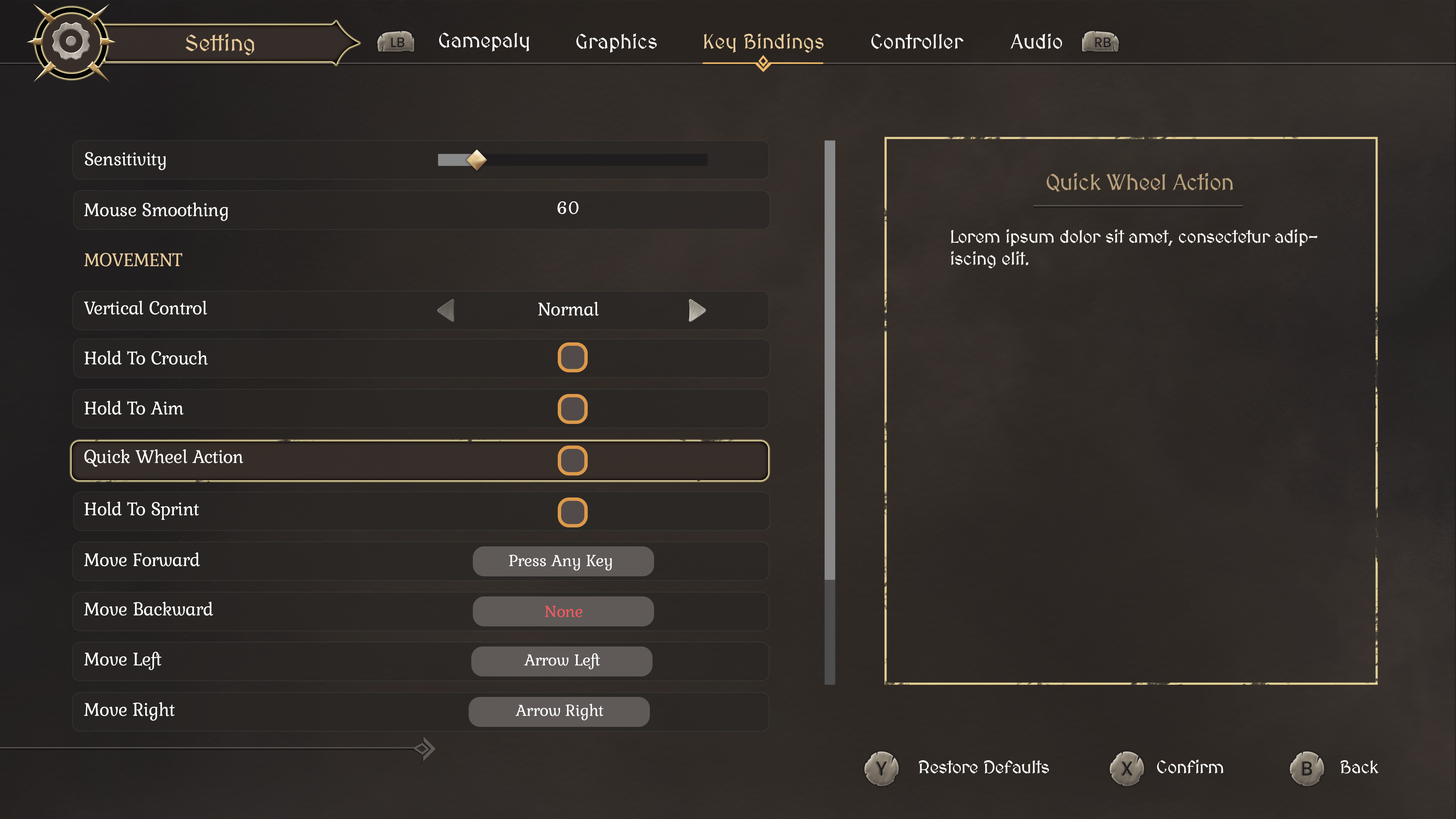
<style>
.page{position:relative;width:1456px;height:819px}
.page>*{position:absolute;margin:0}
.t1{font:22.7px "MedievalSharp";color:#e6c899}
.t2{font:20.5px "MedievalSharp";color:#fefefe}
.t3{font:20.5px "MedievalSharp";color:#ffffff}
.t4{font:20.5px "MedievalSharp";color:#e7cb9c}
.t5{font:19.2px "Kurale-Regular";letter-spacing:-0.02em;color:#ffffff}
.t6{font:22.7px "MedievalSharp";letter-spacing:-0.02em;color:#b79f7b}
.t7{font:18.2px "Kurale-Regular";letter-spacing:-0.02em;color:#ffffff}
.t8{font:18.2px "MedievalSharp";letter-spacing:-0.02em;color:#fffbf5}
.t9{font:19.2px "Kurale-Regular";letter-spacing:-0.02em;color:#e7cb9c}
.t10{font:17.3px "Kurale-Regular";letter-spacing:-0.02em;color:#ffffff}
.t11{font:17.3px "Kurale-Regular";letter-spacing:-0.02em;color:#f75b5f}
.t12{font:18.2px "MedievalSharp";letter-spacing:-0.02em;color:#ffffff}
</style>
<div class="page">
<p class="t1" style="left:185px;top:33px;width:69px;height:22px">Setting</p>
<p class="t2" style="left:439px;top:33px;width:90px;height:19px">Gamepaly</p>
<p class="t3" style="left:576px;top:33px;width:81px;height:20px">Graphics</p>
<p class="t4" style="left:704px;top:33px;width:120px;height:20px">Key Bindings</p>
<p class="t3" style="left:871px;top:34px;width:93px;height:15px">Controller</p>
<p class="t3" style="left:1010px;top:33px;width:52px;height:16px">Audio</p>
<p class="t5" style="left:85px;top:152px;width:81px;height:18px">Sensitivity</p>
<p class="t6" style="left:1046px;top:173px;width:187px;height:19px">Quick Wheel Action</p>
<p class="t5" style="left:84px;top:202px;width:144px;height:19px">Mouse Smoothing</p>
<p class="t7" style="left:557px;top:201px;width:22px;height:13px">60</p>
<p class="t8" style="left:951px;top:229px;width:367px;height:39px">Lorem ipsum dolor sit amet, consectetur adipiscing elit.</p>
<p class="t9" style="left:84px;top:253px;width:98px;height:14px">MOVEMENT</p>
<p class="t5" style="left:84px;top:301px;width:123px;height:14px">Vertical Control</p>
<p class="t5" style="left:538px;top:302px;width:61px;height:14px">Normal</p>
<p class="t5" style="left:84px;top:351px;width:124px;height:14px">Hold To Crouch</p>
<p class="t5" style="left:84px;top:401px;width:100px;height:14px">Hold To Aim</p>
<p class="t5" style="left:84px;top:449px;width:159px;height:18px">Quick Wheel Action</p>
<p class="t5" style="left:84px;top:502px;width:115px;height:18px">Hold To Sprint</p>
<p class="t5" style="left:84px;top:552px;width:116px;height:14px">Move Forward</p>
<p class="t10" style="left:509px;top:555px;width:103px;height:16px">Press Any Key</p>
<p class="t5" style="left:84px;top:602px;width:129px;height:14px">Move Backward</p>
<p class="t11" style="left:545px;top:606px;width:37px;height:11px">None</p>
<p class="t5" style="left:84px;top:652px;width:78px;height:18px">Move Left</p>
<p class="t10" style="left:524px;top:653px;width:76px;height:16px">Arrow Left</p>
<p class="t5" style="left:84px;top:702px;width:91px;height:19px">Move Right</p>
<p class="t10" style="left:515px;top:704px;width:89px;height:16px">Arrow Right</p>
<p class="t12" style="left:919px;top:760px;width:130px;height:13px">Restore Defaults</p>
<p class="t12" style="left:1157px;top:759px;width:67px;height:14px">Confirm</p>
<p class="t12" style="left:1340px;top:760px;width:39px;height:13px">Back</p>
</div>
